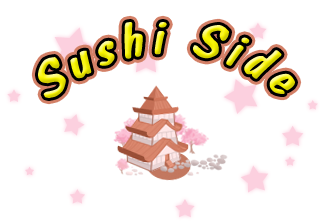
<style>
.page{position:relative;width:320px;height:221px;background:#ffffff}
.page>*{position:absolute;margin:0}
.t1{font:50.8px "DomCasualBT-Regular";letter-spacing:0.095em;font-style:italic}
</style>
<div class="page">
<p class="t1" style="left:38px;top:22px;width:257px;height:76px;rotate:-1deg">Sushi Side</p>
</div>
